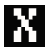
<style>
.page{position:relative;width:50px;height:51px;background:#060606}
.page>*{position:absolute;margin:0}
.t1{font:48px "Fixedsys";color:#fefcfb}
</style>
<div class="page">
<p class="t1" style="left:13px;top:8px;width:24px;height:34px">X</p>
</div>
